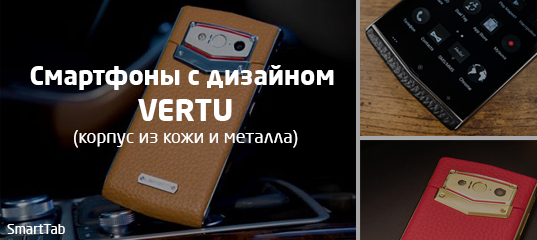
<style>
.page{position:relative;width:537px;height:240px}
.page>*{position:absolute;margin:0}
.t1{font:18px "NeoSansPro-Regular";color:#ffffff}
.t2{font:25.8px "NeoSansPro-Bold";color:#ffffff}
.t3{font:30px "NeoSansPro-Bold";color:#ffffff}
.t4{font:14px "NeoSansPro-Regular";color:#ffffff}
</style>
<div class="page">
<p class="t1" style="left:30px;top:65px;width:304px;height:83px;text-align:center"><span class="t2">Смартфоны с дизайном <br></span><span class="t3">VERTU<br></span>(корпус из кожи и металла)</p>
<p class="t4" style="left:7px;top:224px;width:58px;height:10px">SmartTab</p>
</div>
